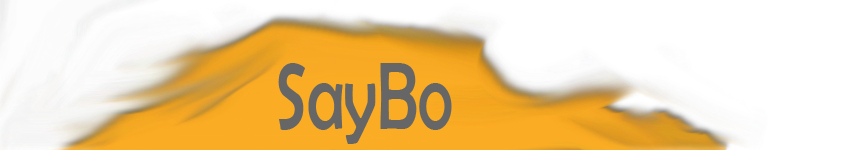
<style>
.page{position:relative;width:850px;height:150px;background:#ffffff}
.page>*{position:absolute;margin:0}
.t1{font:96px "BerlinSansFB-Reg";color:#666666;scale:0.71 1}
</style>
<div class="page">
<p class="t1" style="left:278px;top:63px;width:174px;height:81px">SayBo</p>
</div>
